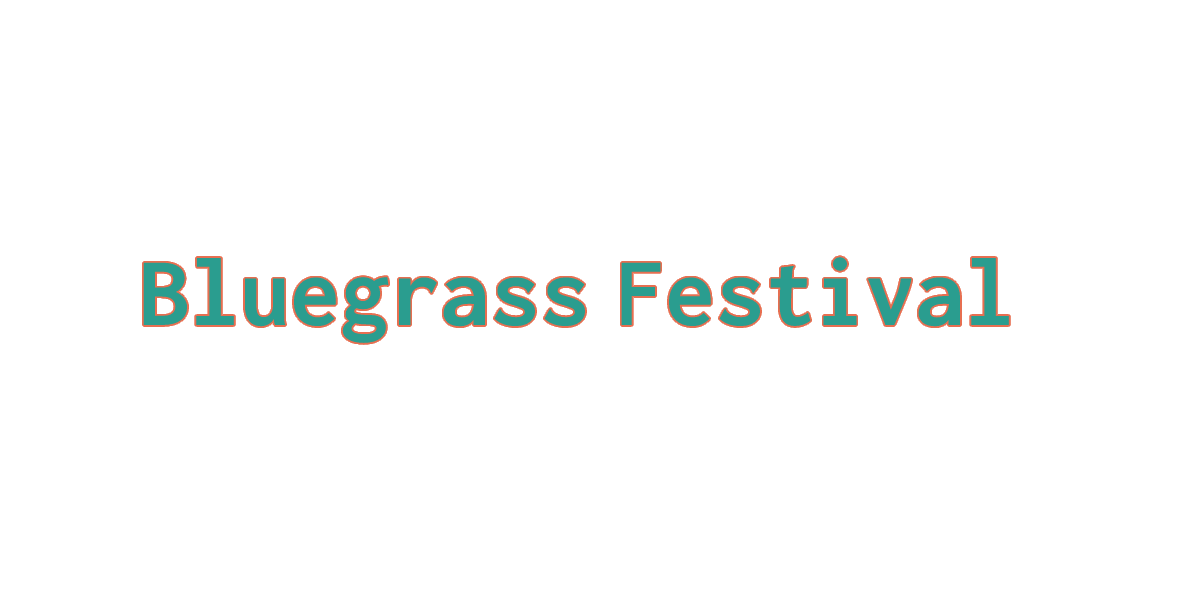
<style>
.page{position:relative;width:1200px;height:600px;background:#ffffff}
.page>*{position:absolute;margin:0}
.t1{font:100px "Inconsolata-Bold";color:#2a9d8f}
</style>
<div class="page">
<p class="t1" style="left:143px;top:257px;width:443px;height:86px">Bluegrass</p>
<p class="t1" style="left:621px;top:257px;width:388px;height:70px">Festival</p>
</div>
